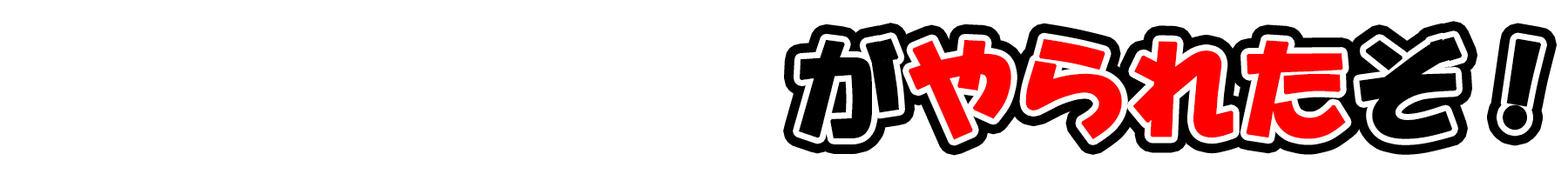
<style>
.page{position:relative;width:1568px;height:174px;background:#ffffff}
.page>*{position:absolute;margin:0}
.t1{font:108.9px "HGSoeiKakupoptai";color:#ff0000;font-weight:bold}
.t2{font:108.9px "HGSoeiKakupoptai";color:#000000;font-weight:bold}
</style>
<div class="page">
<p class="t1" style="left:799px;top:37px;width:742px;height:103px"><span class="t2">が</span>やられた<span class="t2">ぞ！</span></p>
</div>
